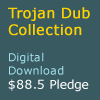
<style>
.page{position:relative;width:100px;height:100px;background:#395a61}
.page>*{position:absolute;margin:0}
.t1{font:14px "Verdana";letter-spacing:0.018em;color:#fed200;font-weight:bold}
.t2{font:11px "Verdana";letter-spacing:0.018em;color:#a3e2ee}
.t3{font:12px "Verdana";letter-spacing:0.018em;color:#fdfdfc}
</style>
<div class="page">
<p class="t1" style="left:8px;top:7px;width:82px;height:85px">Trojan Dub<br>Collection<br><span class="t2"><br>Digital<br>Download<br></span><span class="t3">$88.5 Pledge</span></p>
</div>
